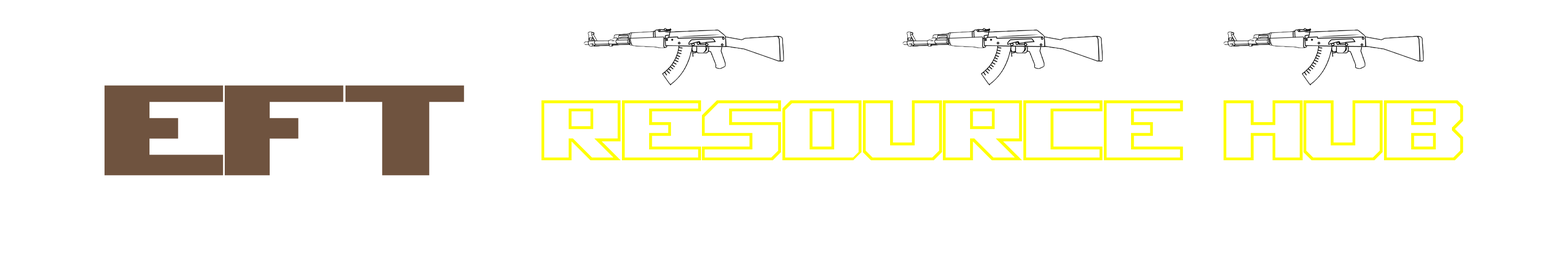
<style>
.page{position:relative;width:1568px;height:261px;background:#ffffff}
.page>*{position:absolute;margin:0}
.t1{font:130.7px "1_EFT_by_iWolf";color:#6f533f}
.t2{font:87.1px "2_EFT_by_iWolf";color:#ffff00}
</style>
<div class="page">
<p class="t1" style="left:105px;top:85px;width:359px;height:91px">EFT</p>
<p class="t2" style="left:541px;top:100px;width:922px;height:60px">RESOURCE HUB</p>
</div>
